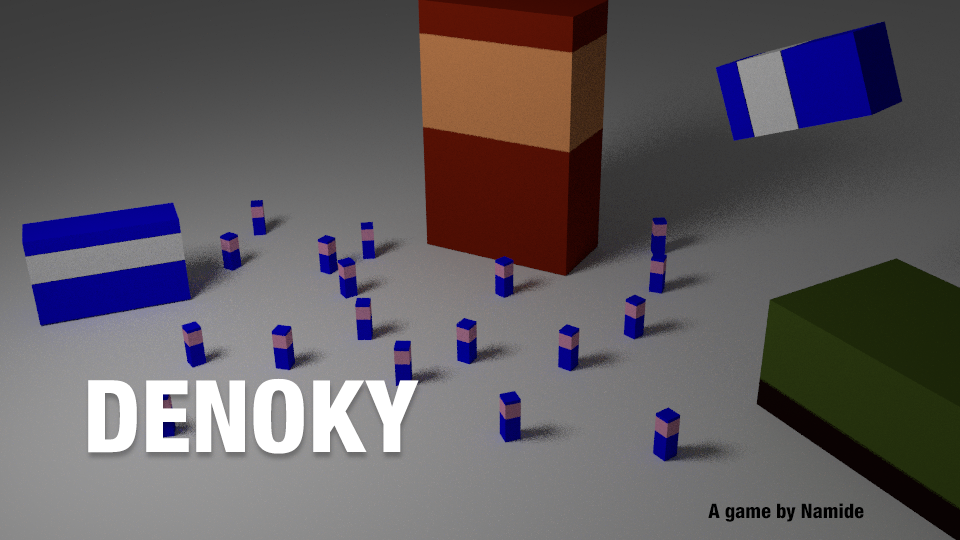
<style>
.page{position:relative;width:960px;height:540px}
.page>*{position:absolute;margin:0}
.t1{font:100px "HelveticaNeueLTStd-HvCn";color:#ffffff;text-transform:uppercase}
.t2{font:20px "HelveticaNeueLTStd-HvCn";color:#000000}
</style>
<div class="page">
<p class="t1" style="left:88px;top:378px;width:331px;height:76px">Denoky</p>
<p class="t2" style="left:708px;top:503px;width:156px;height:19px">A game by Namide</p>
</div>
